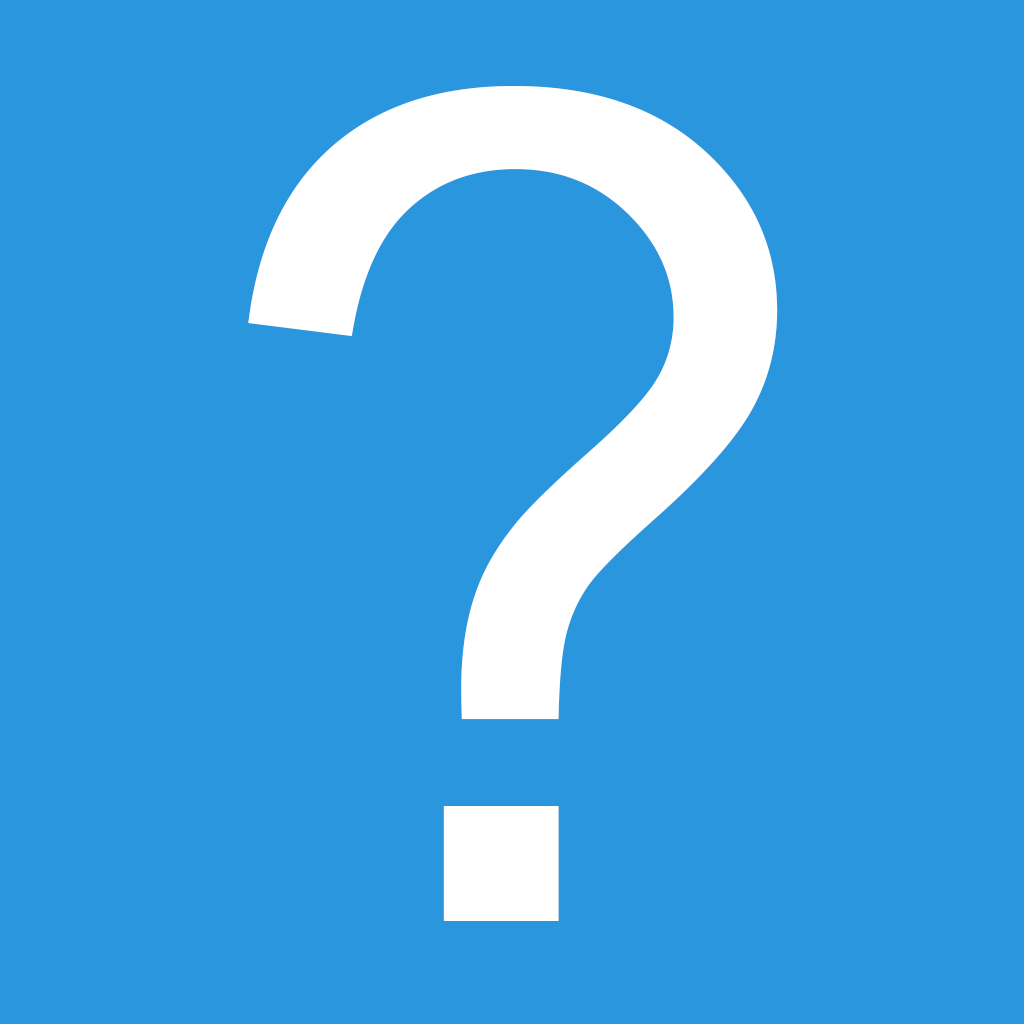
<style>
.page{position:relative;width:1024px;height:1024px;background:#2996dd}
.page>*{position:absolute;margin:0}
.t1{font:1145.5px "ArialMT";color:#ffffff}
</style>
<div class="page">
<p class="t1" style="left:248px;top:86px;width:530px;height:835px">?</p>
</div>
